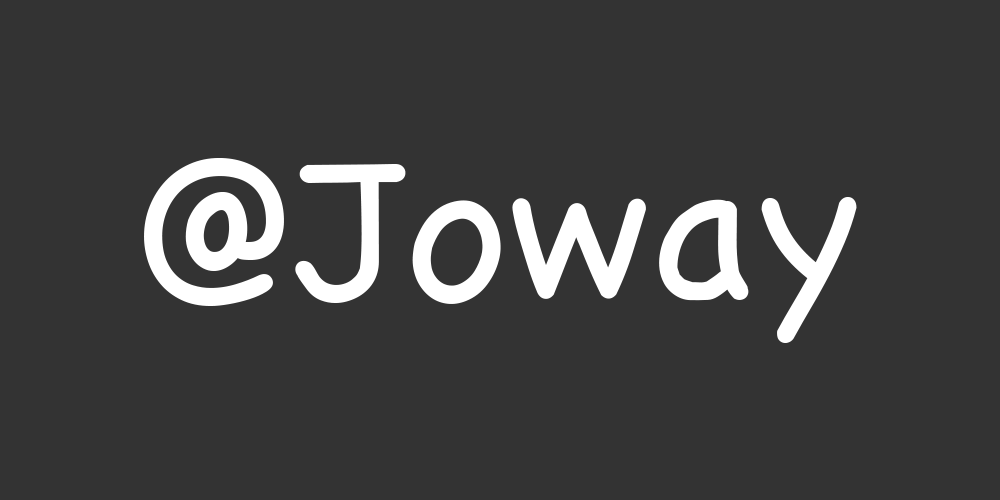
<style>
.page{position:relative;width:1000px;height:500px;background:#333333}
.page>*{position:absolute;margin:0}
.t1{font:200px "Chalkboard";color:#ffffff}
</style>
<div class="page">
<p class="t1" style="left:144px;top:158px;width:713px;height:185px">@Joway</p>
</div>
